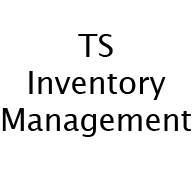
<style>
.page{position:relative;width:192px;height:192px;background:#ffffff}
.page>*{position:absolute;margin:0}
.t1{font:30.7px "LucidaGrande";color:#000000}
</style>
<div class="page">
<p class="t1" style="left:2px;top:34px;width:189px;height:103px;text-align:center">TS<br>Inventory<br>Management</p>
</div>
